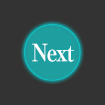
<style>
.page{position:relative;width:105px;height:105px;background:#333333}
.page>*{position:absolute;margin:0}
.t1{font:24px "RyuminPro-ExBold";letter-spacing:-0.08em;color:#fefefe;scale:0.9 1}
</style>
<div class="page">
<p class="t1" style="left:32px;top:43px;width:42px;height:19px">Next</p>
</div>
